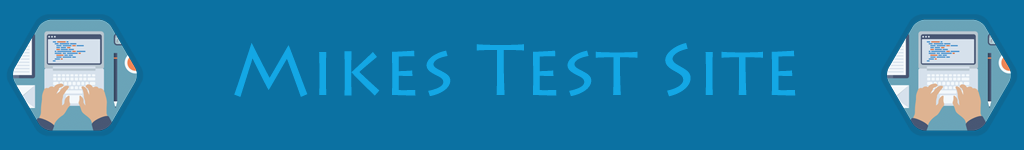
<style>
.page{position:relative;width:1024px;height:150px;background:#0b71a2}
.page>*{position:absolute;margin:0}
.t1{font:72px "LithosPro-Regular";color:#13a7e5}
</style>
<div class="page">
<p class="t1" style="left:234px;top:43px;width:562px;height:54px">Mikes Test Site</p>
</div>
